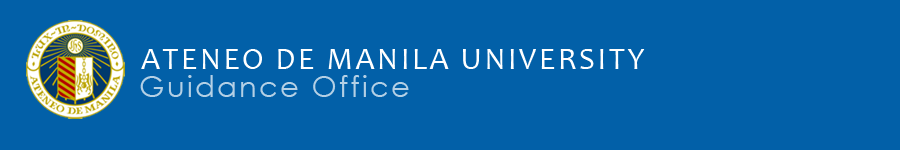
<style>
.page{position:relative;width:900px;height:150px;background:#0260a8}
.page>*{position:absolute;margin:0}
.t1{font:31.3px "Candara";letter-spacing:0.08em;color:#ffffff}
.t2{font:29.2px "CenturyGothic";letter-spacing:0.075em;color:#b4d0e5}
</style>
<div class="page">
<p class="t1" style="left:141px;top:49px;width:504px;height:20px">ATENEO DE MANILA UNIVERSITY</p>
<p class="t2" style="left:140px;top:75px;width:269px;height:22px">Guidance Office</p>
</div>
